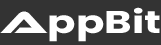
<style>
.page{position:relative;width:161px;height:45px;background:#333333}
.page>*{position:absolute;margin:0}
.t1{font:31.4px "Poppins-Bold";color:#ffffff;scale:1.33 1}
.t2{font:31.4px "EthnocentricRg-Regular";color:#ffffff;scale:1.33 1}
</style>
<div class="page">
<p class="t1" style="left:0px;top:7px;width:160px;height:35px"><span class="t2">a</span>ppBit</p>
</div>
